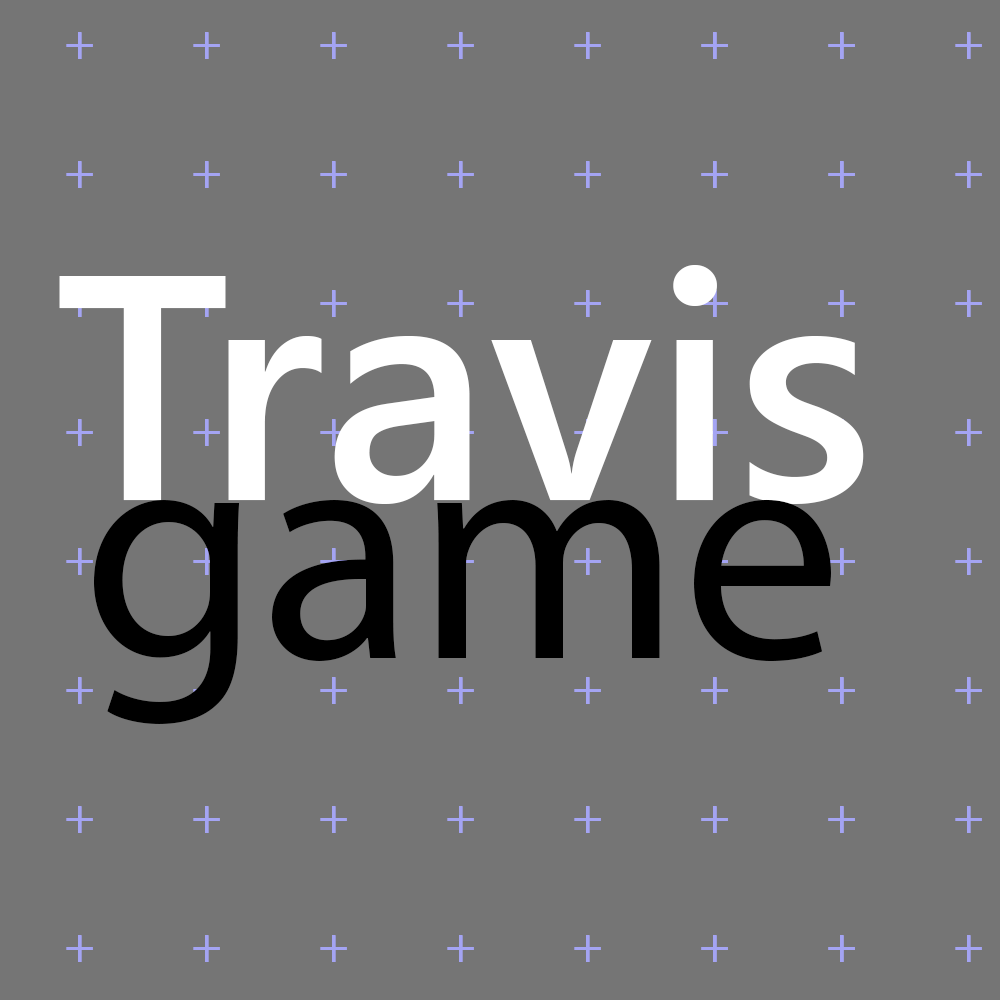
<style>
.page{position:relative;width:1000px;height:1000px;background:#757575}
.page>*{position:absolute;margin:0}
.t1{font:320px "SegoeUI-Semibold";color:#ffffff}
.t2{font:320px "MyriadPro-Regular";color:#000000}
</style>
<div class="page">
<p class="t1" style="left:59px;top:265px;width:805px;height:239px">Travis</p>
<p class="t2" style="left:94px;top:499px;width:737px;height:225px">game</p>
</div>
